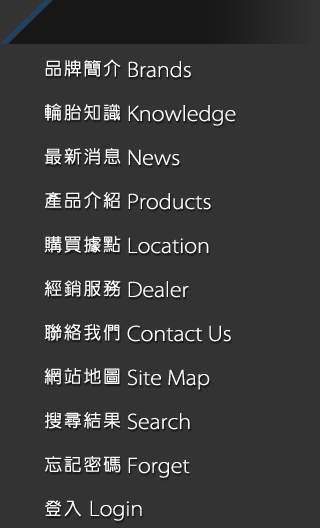
<style>
.page{position:relative;width:320px;height:528px;background:#333333}
.page>*{position:absolute;margin:0}
.t1{font:17.5px/44px "NewGothic-Medium";letter-spacing:0.12em;color:#ffffff}
.t2{font:22.2px/44px "MyriadPro-Light";letter-spacing:-0.005em;color:#ffffff;scale:1.09 1}
.t3{font:22.2px "MyriadPro-Light";letter-spacing:-0.005em;color:#ffffff;scale:1.09 1}
</style>
<div class="page">
<p class="t1" style="left:44px;top:59px;width:77px;height:458px">品牌簡介<br>輪胎知識<br>最新消息<br>產品介紹<br>購買據點<br>經銷服務<br>聯絡我們<br>網站地圖<br>搜尋結果<br>忘記密碼<br>登入</p>
<p class="t2" style="left:127px;top:61px;width:109px;height:417px">Brands<br>Knowledge<br>News<br>Products<br>Location<br>Dealer<br>Contact Us<br>Site Map<br>Search<br>Forget</p>
<p class="t3" style="left:90px;top:500px;width:52px;height:21px">Login</p>
</div>
